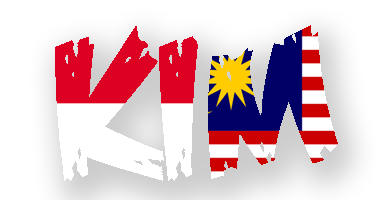
<style>
.page{position:relative;width:390px;height:200px;background:#ffffff}
.page>*{position:absolute;margin:0}
.t1{font:206.7px "FeastofFleshBB"}
</style>
<div class="page">
<p class="t1" style="left:55px;top:25px;width:283px;height:156px">KIM</p>
</div>
